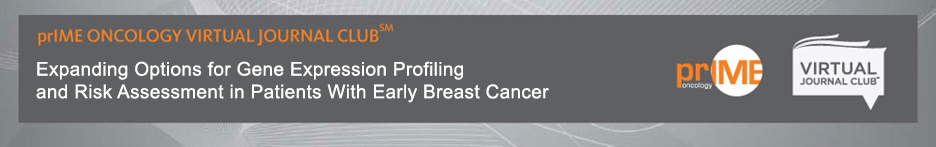
<style>
.page{position:relative;width:936px;height:147px;background:#5f6062}
.page>*{position:absolute;margin:0}
.t1{font:14.2px "ArialMT";letter-spacing:0.02em;color:#ffffff}
</style>
<div class="page">
<p class="t1" style="left:36px;top:61px;width:513px;height:42px">Expanding Options for Gene Expression Profiling <br>and Risk Assessment in Patients With Early Breast Cancer</p>
</div>
